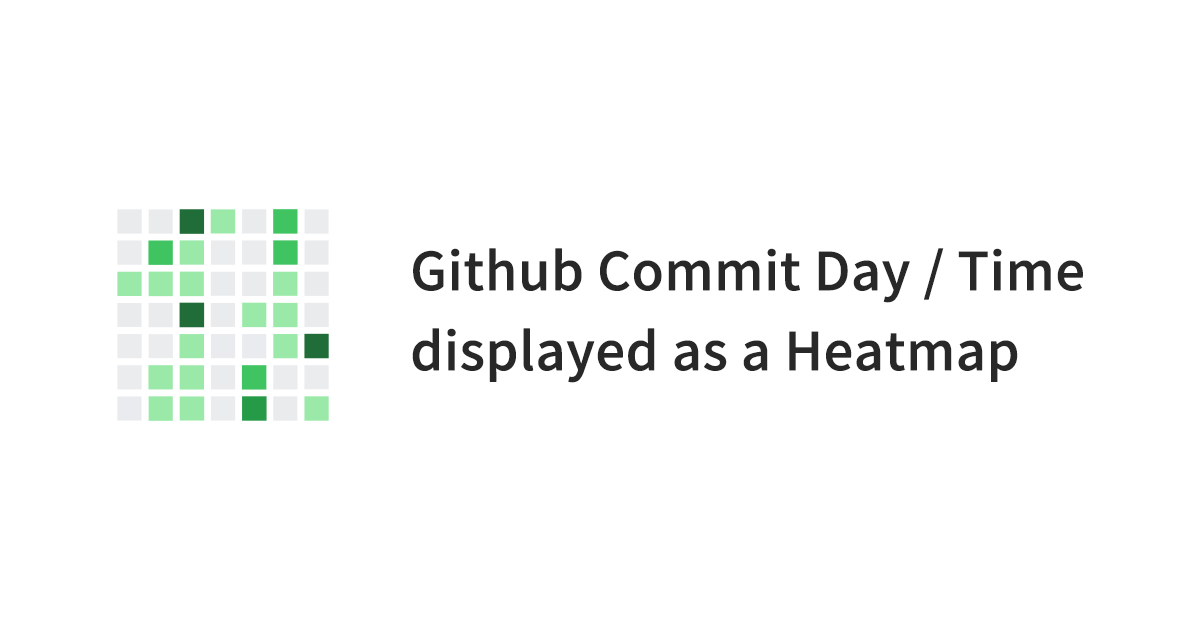
<style>
.page{position:relative;width:1200px;height:630px;background:#ffffff}
.page>*{position:absolute;margin:0}
.t1{font:52px/80px "GenYoGothicTW-Medium-TTF";letter-spacing:-0.01em;color:#282828;font-weight:bold}
</style>
<div class="page">
<p class="t1" style="left:412px;top:248px;width:671px;height:135px">Github Commit Day / Time <br>displayed as a Heatmap</p>
</div>
